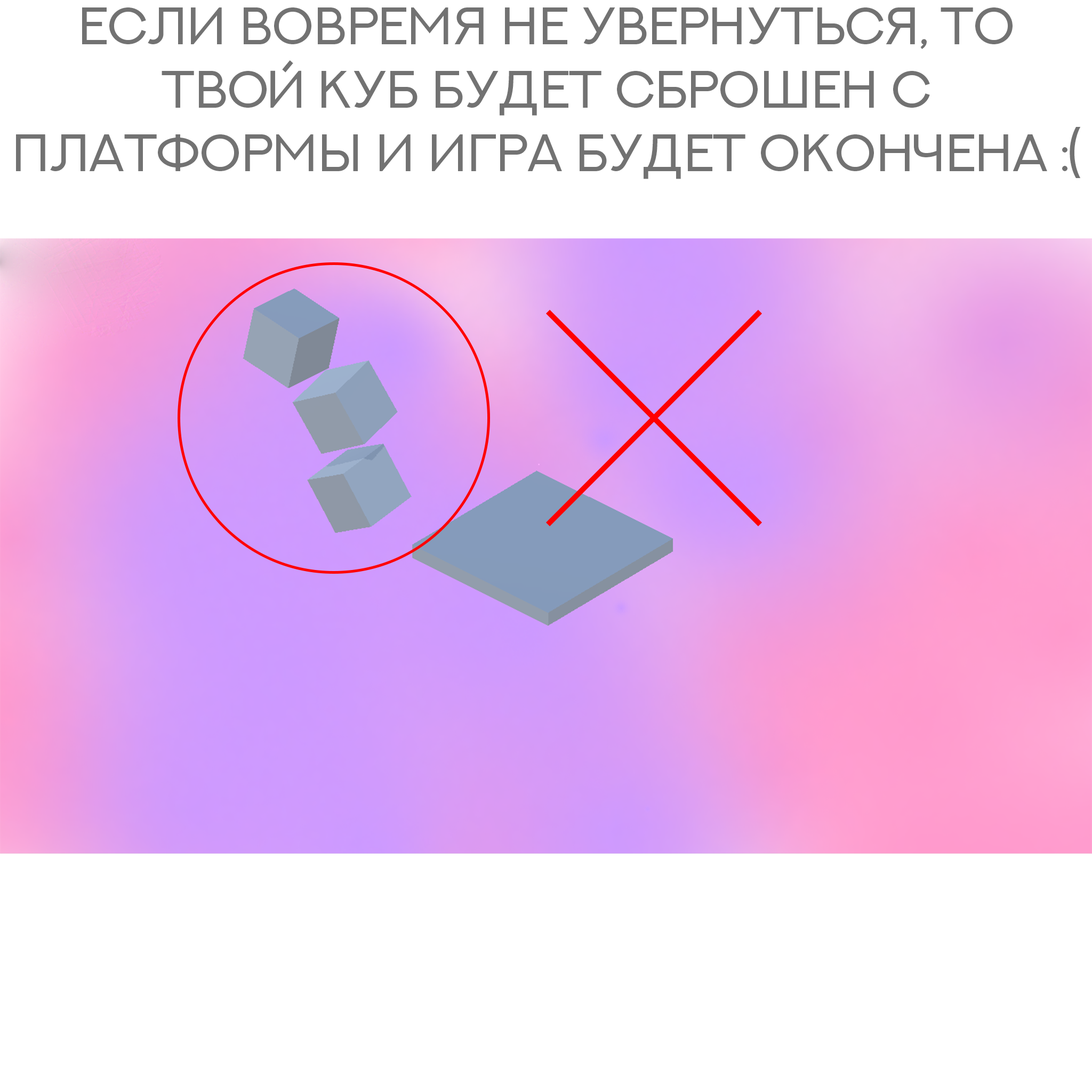
<style>
.page{position:relative;width:1092px;height:1092px;background:#ffffff}
.page>*{position:absolute;margin:0}
.t1{font:52.8px "NEXTART-Regular";color:#727272}
</style>
<div class="page">
<p class="t1" style="left:16px;top:7px;width:1065px;height:172px;text-align:center">если вовремя не увернуться, то твой куб будет сброшен с платформы и игра будет окончена :(</p>
</div>
